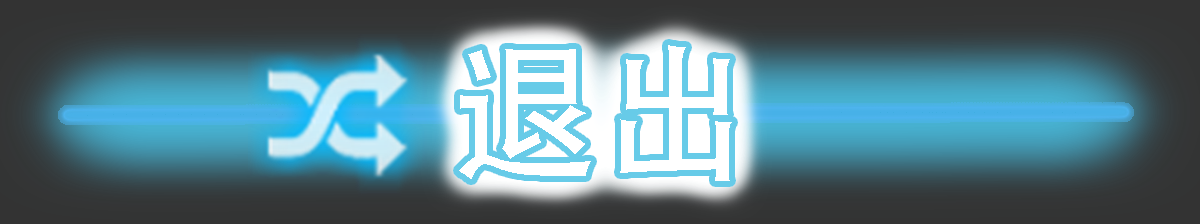
<style>
.page{position:relative;width:1200px;height:224px}
.page>*{position:absolute;margin:0}
.t1{font:150px "AdobeHeitiStd-Regular";color:#ffffff}
</style>
<div class="page">
<p class="t1" style="left:459px;top:45px;width:273px;height:136px">退出</p>
</div>
